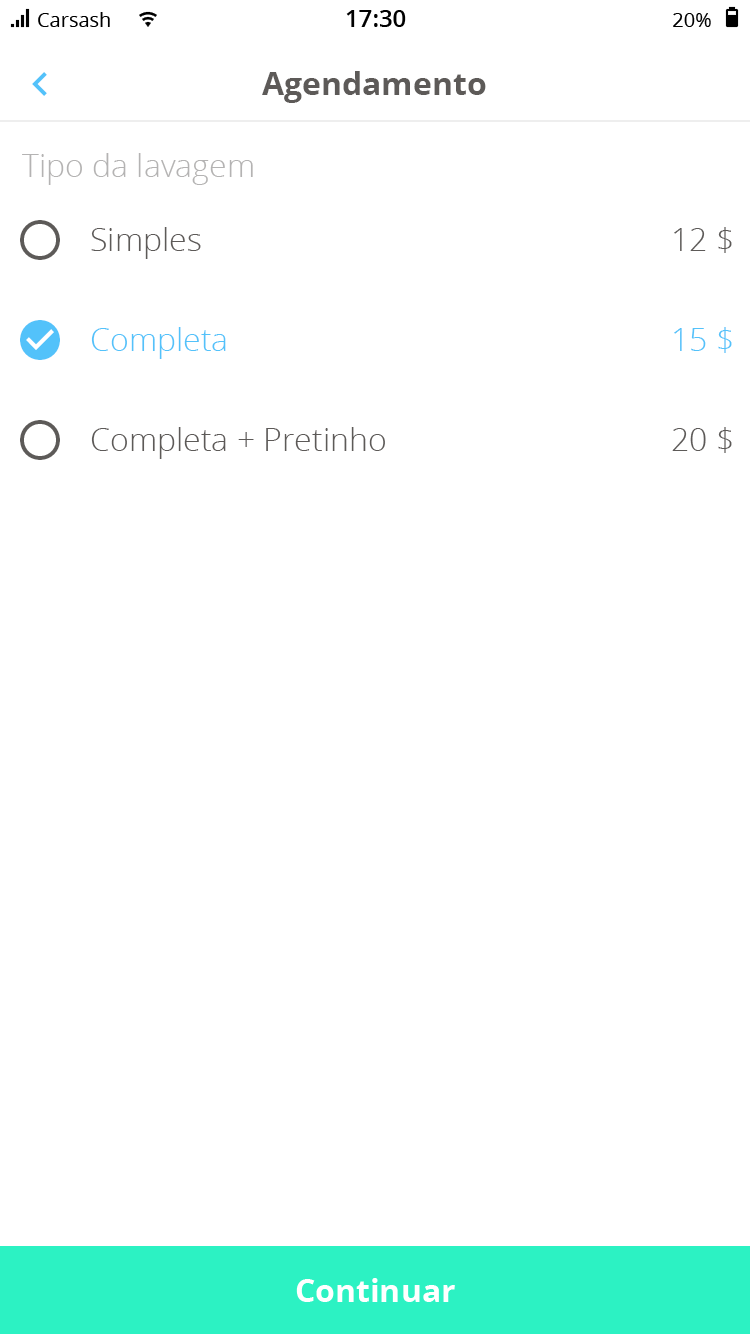
<style>
.page{position:relative;width:750px;height:1334px;background:#ffffff}
.page>*{position:absolute;margin:0}
.t1{font:32px "OpenSans-Bold";color:#5d5a58}
.t2{font:32px "OpenSans-Light";color:#b4b3b3}
.t3{font:32px "OpenSans-Light";color:#5d5a58}
.t4{font:32px "OpenSans-Light";color:#53c2fa}
</style>
<div class="page">
<p class="t1" style="left:262px;top:71px;width:224px;height:32px">Agendamento</p>
<p class="t2" style="left:22px;top:153px;width:231px;height:32px">Tipo da lavagem</p>
<p class="t3" style="left:91px;top:227px;width:110px;height:32px">Simples</p>
<p class="t3" style="left:674px;top:227px;width:58px;height:26px">12 $</p>
<p class="t4" style="left:91px;top:327px;width:135px;height:32px">Completa</p>
<p class="t4" style="left:674px;top:327px;width:58px;height:26px">15 $</p>
<p class="t3" style="left:91px;top:427px;width:294px;height:32px">Completa + Pretinho</p>
<p class="t3" style="left:672px;top:427px;width:60px;height:26px">20 $</p>
</div>
